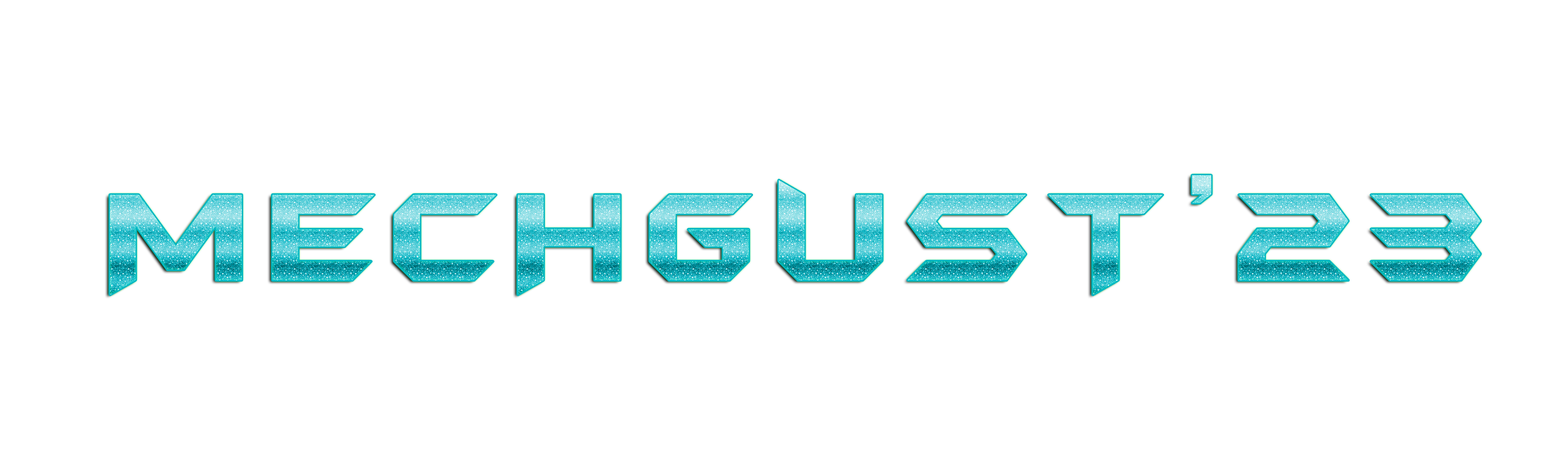
<style>
.page{position:relative;width:1568px;height:474px;background:#ffffff}
.page>*{position:absolute;margin:0}
.t1{font:144.7px "BatmanForeverAlternate";letter-spacing:0.08em}
</style>
<div class="page">
<p class="t1" style="left:110px;top:175px;width:1371px;height:120px">MECHGUST’23</p>
</div>
